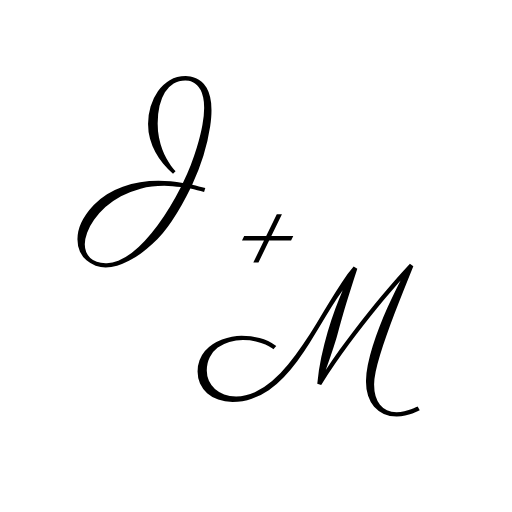
<style>
.page{position:relative;width:512px;height:512px;background:#ffffff}
.page>*{position:absolute;margin:0}
.t1{font:167px "Parisienne-Regular";color:#000000}
</style>
<div class="page">
<p class="t1" style="left:77px;top:76px;width:135px;height:192px">J</p>
<p class="t1" style="left:241px;top:214px;width:53px;height:49px">+</p>
<p class="t1" style="left:197px;top:263px;width:223px;height:154px">M</p>
</div>
